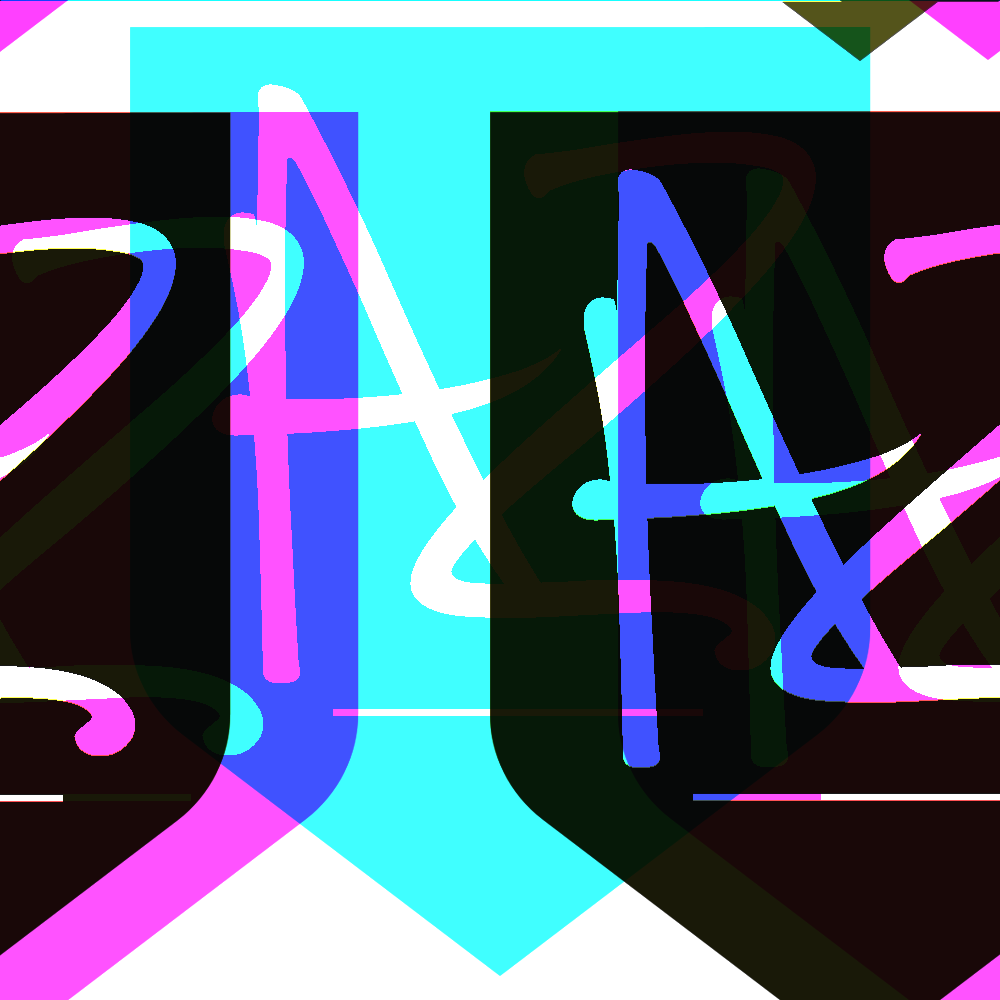
<style>
.page{position:relative;width:1000px;height:1000px;background:#190808}
.page>*{position:absolute;margin:0}
.t1{font:697.4px "Drawing_with_markers"}
</style>
<div class="page">
<p class="t1" style="left:212px;top:83px;width:349px;height:599px;rotate:-13deg">A</p>
</div>
